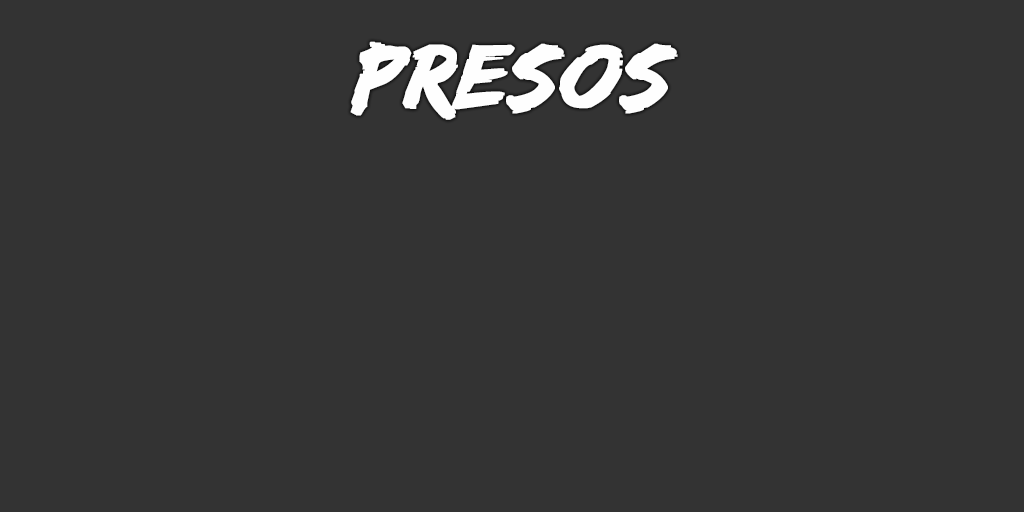
<style>
.page{position:relative;width:1024px;height:512px;background:#333333}
.page>*{position:absolute;margin:0}
.t1{font:94px "EdoSZ";color:#fefefe;font-weight:bold;font-style:italic;scale:1.04 1}
</style>
<div class="page">
<p class="t1" style="left:350px;top:41px;width:328px;height:79px">presos</p>
</div>
